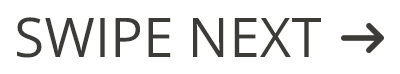
<style>
.page{position:relative;width:400px;height:74px;background:#ffffff}
.page>*{position:absolute;margin:0}
.t1{font:54.9px "OpenSans";letter-spacing:0.01em;color:#3c3b38;text-transform:uppercase}
</style>
<div class="page">
<p class="t1" style="left:17px;top:17px;width:304px;height:41px">SWIPE NEXT</p>
</div>
